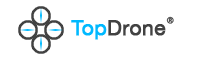
<style>
.page{position:relative;width:200px;height:60px;background:#ffffff}
.page>*{position:absolute;margin:0}
.t1{font:8.3px "HelveticaNeue";color:#424242;font-weight:bold}
.t2{font:20.8px "HelveticaNeue";color:#424242;font-weight:bold}
.t3{font:20.8px "HelveticaNeue";color:#00baff;font-weight:bold}
</style>
<div class="page">
<p class="t1" style="left:166px;top:16px;width:8px;height:8px">®</p>
<p class="t2" style="left:71px;top:20px;width:95px;height:20px"><span class="t3">Top</span>Drone</p>
</div>
